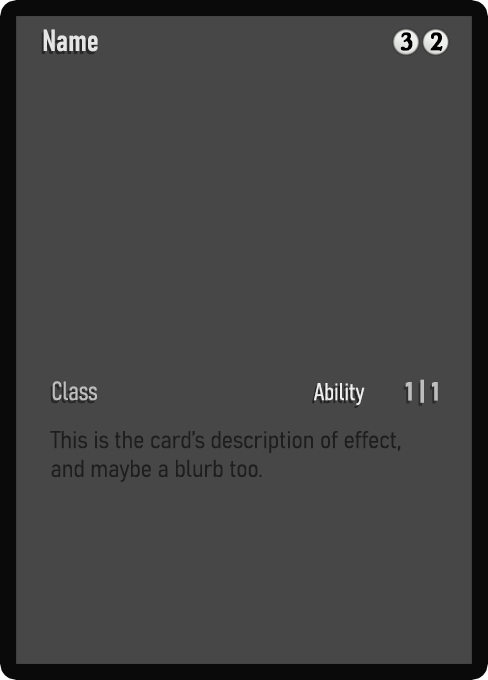
<style>
.page{position:relative;width:488px;height:680px;background:#474747}
.page>*{position:absolute;margin:0}
.t1{font:30px "Bahnschrift-SemiBoldCondensed";color:#f2f2f2;font-weight:bold}
.t2{font:25px "WTRRoycroft";color:#000000;font-weight:bold;scale:1.09 1}
.t3{font:26px "Bahnschrift-LightCondensed";color:#c8c8c8;font-weight:bold}
.t4{font:24px "Bahnschrift-LightCondensed";color:#f0efef;font-weight:bold}
.t5{font:26px "Bahnschrift-BoldSemiCondensed";color:#bebebe;font-weight:bold}
.t6{font:24px "Bahnschrift-LightSemiCondensed";color:#1e1e1e;font-weight:bold}
</style>
<div class="page">
<p class="t1" style="left:43px;top:29px;width:55px;height:23px;opacity:0.9">Name</p>
<p class="t2" style="left:400px;top:32px;width:13px;height:19px">3</p>
<p class="t2" style="left:430px;top:32px;width:13px;height:19px">2</p>
<p class="t3" style="left:52px;top:381px;width:45px;height:20px;opacity:0.9">Class</p>
<p class="t4" style="left:314px;top:383px;width:51px;height:23px">Ability</p>
<p class="t5" style="left:405px;top:379px;width:33px;height:24px">1 | 1</p>
<p class="t6" style="left:50px;top:431px;width:351px;height:51px">This is the card’s description of effect, and maybe a blurb too.</p>
</div>
